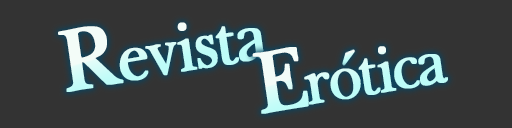
<style>
.page{position:relative;width:512px;height:128px;background:#333333}
.page>*{position:absolute;margin:0}
.t1{font:78.3px "BaskervilleLight";letter-spacing:-0.06em;font-weight:bold;scale:0.93 1}
.t2{font:102.7px "BaskervilleLight";letter-spacing:-0.06em;font-weight:bold;scale:0.93 1}
.t3{font:74px "BaskervilleLight";letter-spacing:-0.06em;color:#c7fcf8;font-weight:bold;scale:0.93 1}
.t4{font:102.7px "BaskervilleLight";letter-spacing:-0.06em;color:#c7fcf8;font-weight:bold;scale:0.93 1}
</style>
<div class="page">
<p class="t1" style="left:58px;top:22px;width:211px;height:70px;rotate:-10deg"><span class="t2">R</span>evista</p>
<p class="t3" style="left:252px;top:46px;width:196px;height:68px;rotate:-10deg"><span class="t4">E</span>rotica</p>
</div>
